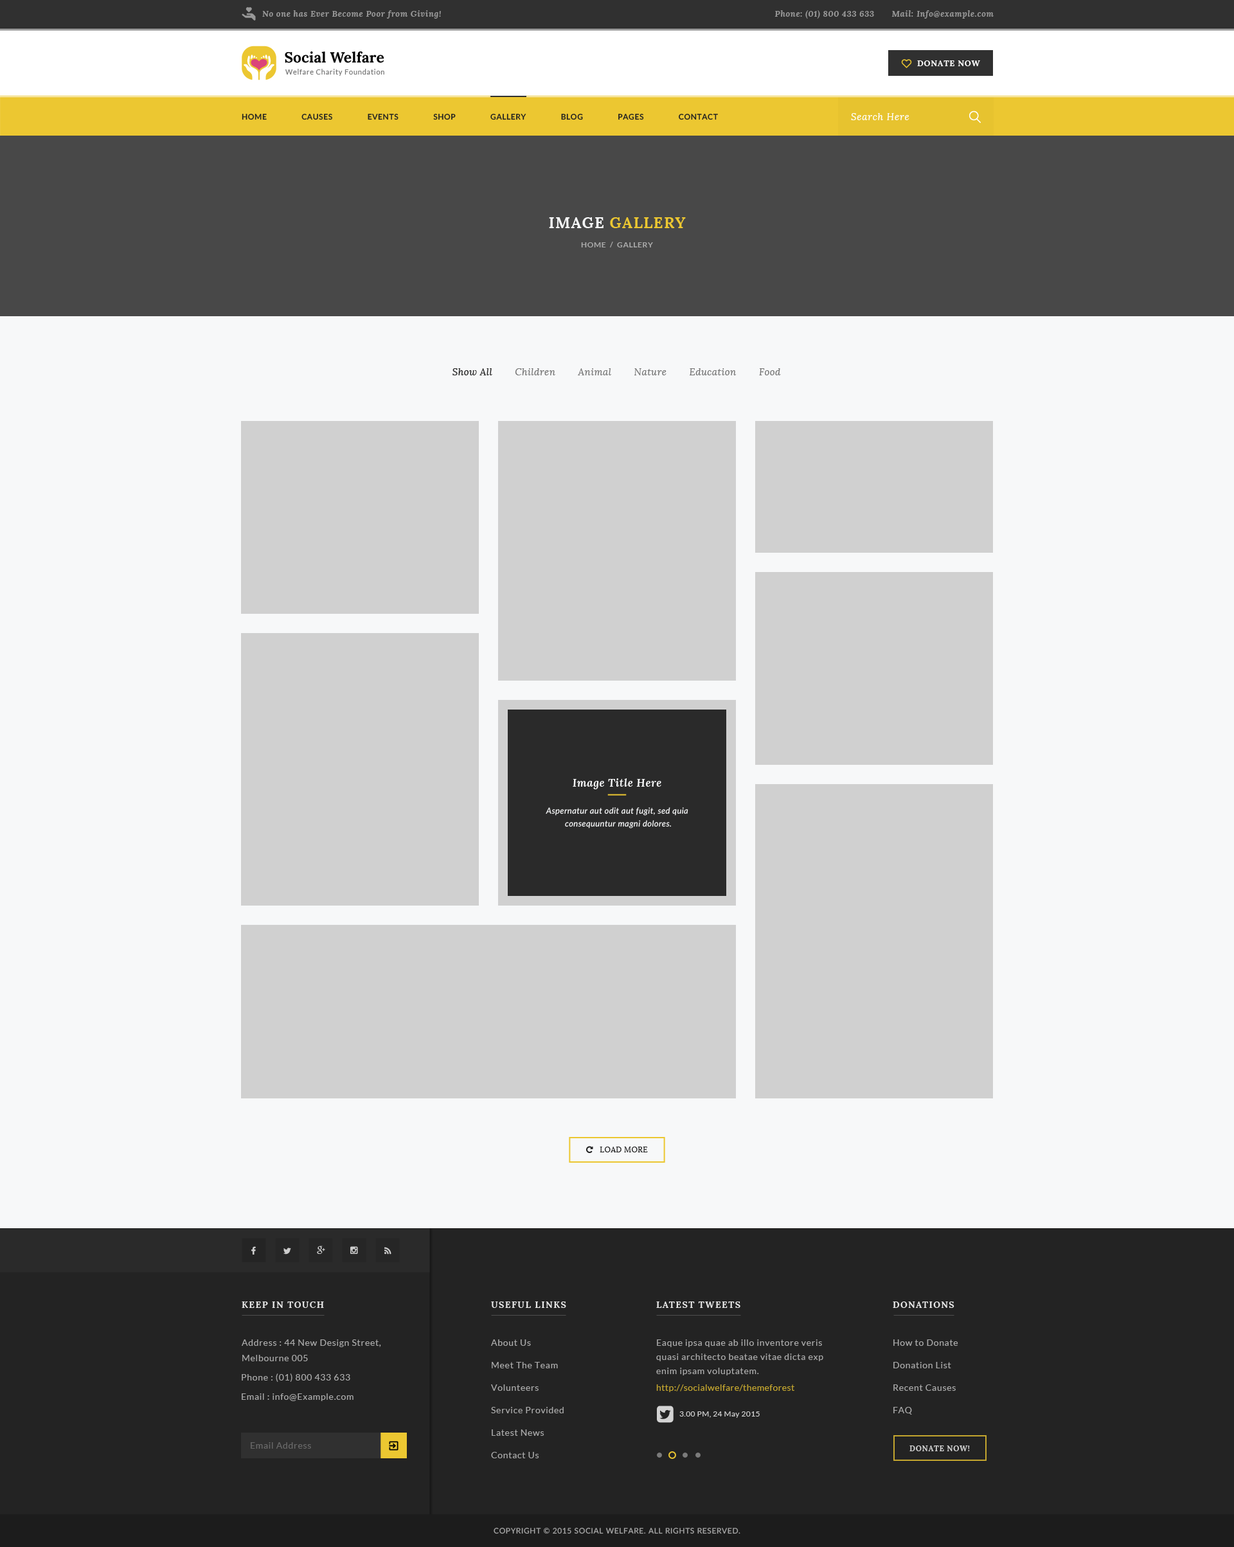
<style>
.page{position:relative;width:1234px;height:1547px;background:#f7f8f9}
.page>*{position:absolute;margin:0}
.t1{font:8.4px "Lora-BoldItalic";letter-spacing:0.05em;color:#999999}
.t2{font:8.4px "Lora-Bold";letter-spacing:0.05em;color:#ffffff;text-transform:uppercase}
.t3{font:7.7px "Lato-Semibold";letter-spacing:0.05em;color:#212121;text-transform:uppercase}
.t4{font:9.6px "Lora-Italic";letter-spacing:0.05em;color:#ffffff}
.t5{font:15.4px "Lora-Bold";letter-spacing:0.05em;color:#ecc731;text-transform:uppercase}
.t6{font:15.4px "Lora-Bold";letter-spacing:0.05em;color:#f7f8f9;text-transform:uppercase}
.t7{font:7.7px "Lato-Bold";letter-spacing:0.05em;color:#aaaaaa;text-transform:uppercase}
.t8{font:9.6px "Lora-Italic";letter-spacing:0.03em;color:#777777}
.t9{font:9.6px "Lora-Italic";letter-spacing:0.03em;color:#232323}
.t10{font:10.9px "Lora-BoldItalic";letter-spacing:0.03em;color:#f7f8f9}
.t11{font:8.4px/12.9px "Lato-MediumItalic";letter-spacing:0.03em;color:#f7f8f9}
.t12{font:9px "Lora-Bold";letter-spacing:0.1em;color:#e8e8e8;text-transform:uppercase}
.t13{font:9px/15.4px "Lato-Regular";letter-spacing:0.05em;color:#aaaaaa}
.t14{font:9px "Lato-Regular";letter-spacing:0.05em;color:#aaaaaa}
.t15{font:9px/14.1px "Lato-Regular";letter-spacing:0.05em;color:#aaaaaa}
.t16{font:9px "Lato-Regular";letter-spacing:0.03em;color:#c4a62e}
.t17{font:7.7px "Lato-Regular";letter-spacing:0.03em;color:#d3d3d3}
.t18{font:9px "Lato-Regular";letter-spacing:0.05em;color:#686868}
.t19{font:7.7px "Lora-Bold";letter-spacing:0.05em;color:#d3d3d3;text-transform:uppercase}
.t20{font:7.7px "Lato-Medium";letter-spacing:0.05em;color:#aaaaaa;text-transform:uppercase}
</style>
<div class="page">
<p class="t1" style="left:262px;top:10px;width:179px;height:9px">No one has Ever Become Poor from Giving!</p>
<p class="t1" style="left:775px;top:10px;width:99px;height:9px">Phone: (01) 800 433 633</p>
<p class="t1" style="left:892px;top:10px;width:102px;height:9px">Mail: Info@example.com</p>
<p class="t2" style="left:917px;top:60px;width:63px;height:6px">donate now</p>
<p class="t3" style="left:242px;top:114px;width:476px;height:6px">home               Causes               Events               Shop               Gallery               Blog               pages               Contact</p>
<p class="t4" style="left:851px;top:113px;width:59px;height:7px">Search Here</p>
<p class="t5" style="left:549px;top:217px;width:137px;height:11px"><span class="t6">Image </span>Gallery</p>
<p class="t7" style="left:581px;top:242px;width:72px;height:6px">Home  /  Gallery</p>
<p class="t8" style="left:453px;top:368px;width:328px;height:7px"><span class="t9">Show All        </span>Children        Animal        Nature        Education        Food</p>
<p class="t10" style="left:573px;top:779px;width:89px;height:10px">Image Title Here</p>
<p class="t11" style="left:546px;top:807px;width:142px;height:22px;text-align:center">Aspernatur aut odit aut fugit, sed quia <br>consequuntur magni dolores.</p>
<p class="t12" style="left:242px;top:1302px;width:82px;height:6px">keep in touch</p>
<p class="t12" style="left:491px;top:1302px;width:75px;height:6px">useful links</p>
<p class="t12" style="left:656px;top:1302px;width:85px;height:6px">Latest Tweets</p>
<p class="t12" style="left:893px;top:1302px;width:62px;height:6px">Donations</p>
<p class="t13" style="left:242px;top:1340px;width:139px;height:22px">Address : 44 New Design Street,<br>Melbourne 005</p>
<p class="t14" style="left:491px;top:1340px;width:40px;height:6px">About Us</p>
<p class="t15" style="left:656px;top:1340px;width:168px;height:36px">Eaque ipsa quae ab illo inventore veris <br>quasi architecto beatae vitae dicta exp<br>enim ipsam voluptatem.</p>
<p class="t14" style="left:894px;top:1340px;width:65px;height:6px">How to Donate</p>
<p class="t14" style="left:242px;top:1374px;width:108px;height:9px">Phone : (01) 800 433 633</p>
<p class="t14" style="left:492px;top:1362px;width:66px;height:7px">Meet The Team</p>
<p class="t14" style="left:894px;top:1362px;width:57px;height:7px">Donation List</p>
<p class="t14" style="left:491px;top:1385px;width:48px;height:6px">Volunteers</p>
<p class="t16" style="left:656px;top:1385px;width:139px;height:7px">http://socialwelfare/themeforest</p>
<p class="t14" style="left:894px;top:1385px;width:62px;height:6px">Recent Causes</p>
<p class="t14" style="left:242px;top:1394px;width:112px;height:7px">Email : info@Example.com</p>
<p class="t14" style="left:491px;top:1407px;width:73px;height:7px">Service Provided</p>
<p class="t14" style="left:894px;top:1407px;width:18px;height:8px">FAQ</p>
<p class="t17" style="left:680px;top:1412px;width:80px;height:6px">3.00 PM, 24 May 2015</p>
<p class="t14" style="left:492px;top:1430px;width:52px;height:6px">Latest News</p>
<p class="t18" style="left:251px;top:1443px;width:60px;height:6px">Email Address</p>
<p class="t19" style="left:910px;top:1446px;width:60px;height:6px">Donate now!</p>
<p class="t14" style="left:491px;top:1452px;width:48px;height:7px">Contact Us</p>
<p class="t20" style="left:494px;top:1528px;width:247px;height:6px">Copyright © 2015 social welfare. All Rights Reserved.</p>
</div>
